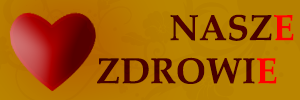
<style>
.page{position:relative;width:300px;height:100px}
.page>*{position:absolute;margin:0}
.t1{font:36px "PalatinoLinotype-Bold";color:#4b0000}
</style>
<div class="page">
<p class="t1" style="left:97px;top:14px;width:197px;height:70px">NASZE<br>    ZDROWIE</p>
</div>
